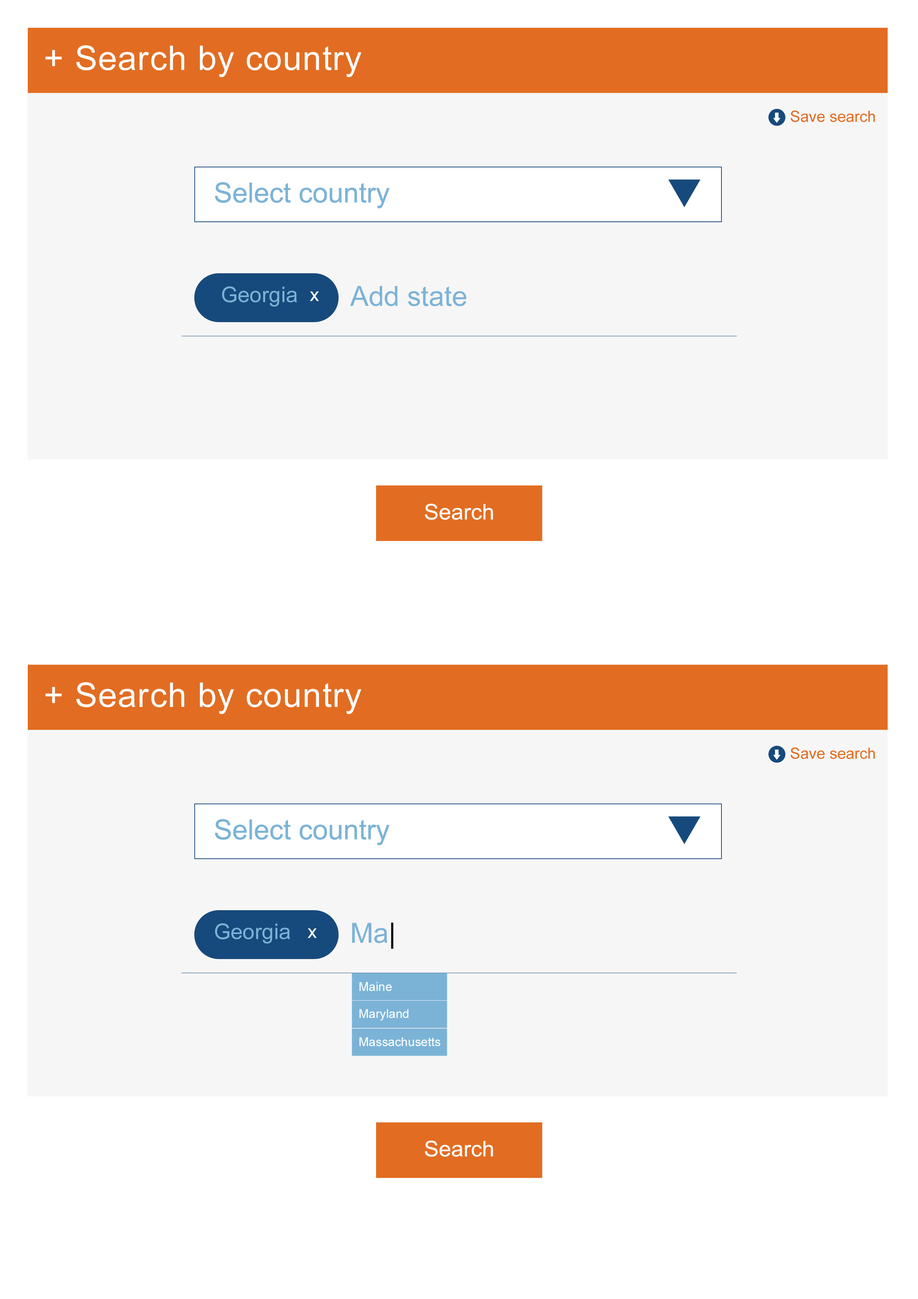
<style>
.page{position:relative;width:918px;height:1299px;background:#f7f6f6}
.page>*{position:absolute;margin:0}
.t1{font:33.9px "ArialMT";letter-spacing:0.025em;color:#ffffff}
.t2{font:15.4px "ArialMT";color:#e26d22}
.t3{font:27.8px "ArialMT";color:#7bb3d7}
.t4{font:21.6px "ArialMT";color:#7bb3d7}
.t5{font:18.5px "ArialMT";color:#ffffff}
.t6{font:21.6px "ArialMT";color:#ffffff}
.t7{font:27.8px "ArialMT";color:#000000}
.t8{font:12.3px "ArialMT";color:#ffffff}
</style>
<div class="page">
<p class="t1" style="left:46px;top:45px;width:315px;height:32px">+ Search by country</p>
<p class="t2" style="left:791px;top:110px;width:84px;height:12px">Save search</p>
<p class="t3" style="left:215px;top:182px;width:175px;height:26px">Select country</p>
<p class="t4" style="left:222px;top:286px;width:75px;height:21px">Georgia</p>
<p class="t5" style="left:310px;top:291px;width:9px;height:10px">x</p>
<p class="t3" style="left:350px;top:286px;width:116px;height:20px">Add state</p>
<p class="t6" style="left:425px;top:504px;width:68px;height:16px">Search</p>
<p class="t1" style="left:46px;top:682px;width:315px;height:32px">+ Search by country</p>
<p class="t2" style="left:791px;top:747px;width:84px;height:12px">Save search</p>
<p class="t3" style="left:215px;top:819px;width:175px;height:26px">Select country</p>
<p class="t4" style="left:215px;top:923px;width:75px;height:20px">Georgia</p>
<p class="t5" style="left:308px;top:928px;width:9px;height:10px">x</p>
<p class="t3" style="left:352px;top:922px;width:42px;height:27px">Ma<span class="t7">|</span></p>
<p class="t8" style="left:359px;top:982px;width:33px;height:9px">Maine</p>
<p class="t8" style="left:359px;top:1009px;width:50px;height:11px">Maryland</p>
<p class="t8" style="left:359px;top:1037px;width:82px;height:9px">Massachusetts</p>
<p class="t6" style="left:425px;top:1140px;width:68px;height:17px">Search</p>
</div>
